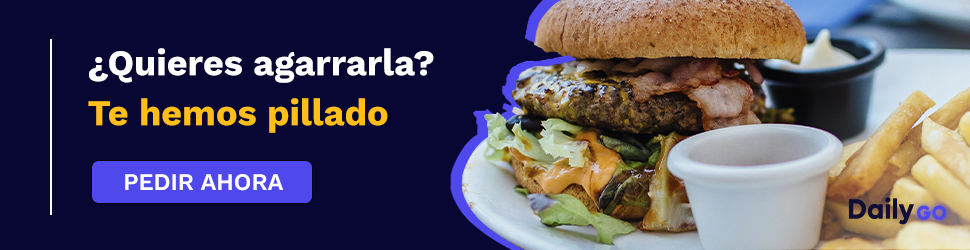
<style>
.page{position:relative;width:970px;height:250px;background:#080632}
.page>*{position:absolute;margin:0}
.t1{font:36px/50px "WorkSans-Bold";color:#ffffff}
.t2{font:36px/50px "WorkSans-Bold";color:#ffbf18}
.t3{font:23.7px "WorkSans-SemiBold";color:#ffffff}
</style>
<div class="page">
<p class="t1" style="left:88px;top:48px;width:346px;height:85px">¿Quieres agarrarla?<br><span class="t2">Te hemos pillado</span></p>
<p class="t3" style="left:125px;top:174px;width:159px;height:17px">PEDIR AHORA</p>
</div>
